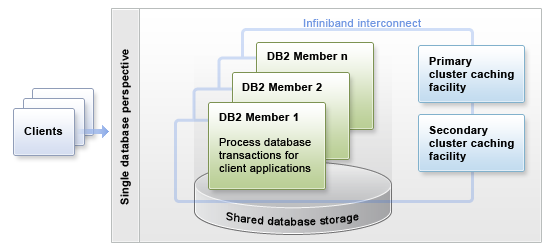
<style>
.page{position:relative;width:550px;height:250px;background:#ffffff}
.page>*{position:absolute;margin:0}
.t1{font:11px "ArialMT";letter-spacing:0.03em;color:#7197e2}
.t2{font:11px "Arial-BoldMT";letter-spacing:0.03em;color:#010101}
.t3{font:11px/13px "ArialMT";letter-spacing:0.025em;color:#010101}
.t4{font:11px "ArialMT";letter-spacing:0.03em;color:#010101}
</style>
<div class="page">
<p class="t1" style="left:303px;top:19px;width:118px;height:8px">Infiniband interconnect</p>
<p class="t2" style="left:120px;top:49px;width:11px;height:156px;rotate:-90deg">Single database perspective</p>
<p class="t2" style="left:267px;top:52px;width:81px;height:8px">DB2 Member n</p>
<p class="t2" style="left:429px;top:57px;width:85px;height:36px">Primary <br>cluster caching <br>facility</p>
<p class="t2" style="left:242px;top:83px;width:80px;height:8px">DB2 Member 2</p>
<p class="t2" style="left:219px;top:113px;width:79px;height:8px">DB2 Member 1</p>
<p class="t2" style="left:429px;top:126px;width:85px;height:36px">Secondary <br>cluster caching <br>facility</p>
<p class="t2" style="left:24px;top:127px;width:39px;height:8px">Clients</p>
<p class="t3" style="left:219px;top:138px;width:92px;height:36px">Process database transactions for client applications</p>
<p class="t4" style="left:226px;top:212px;width:133px;height:14px">Shared database storage</p>
</div>
